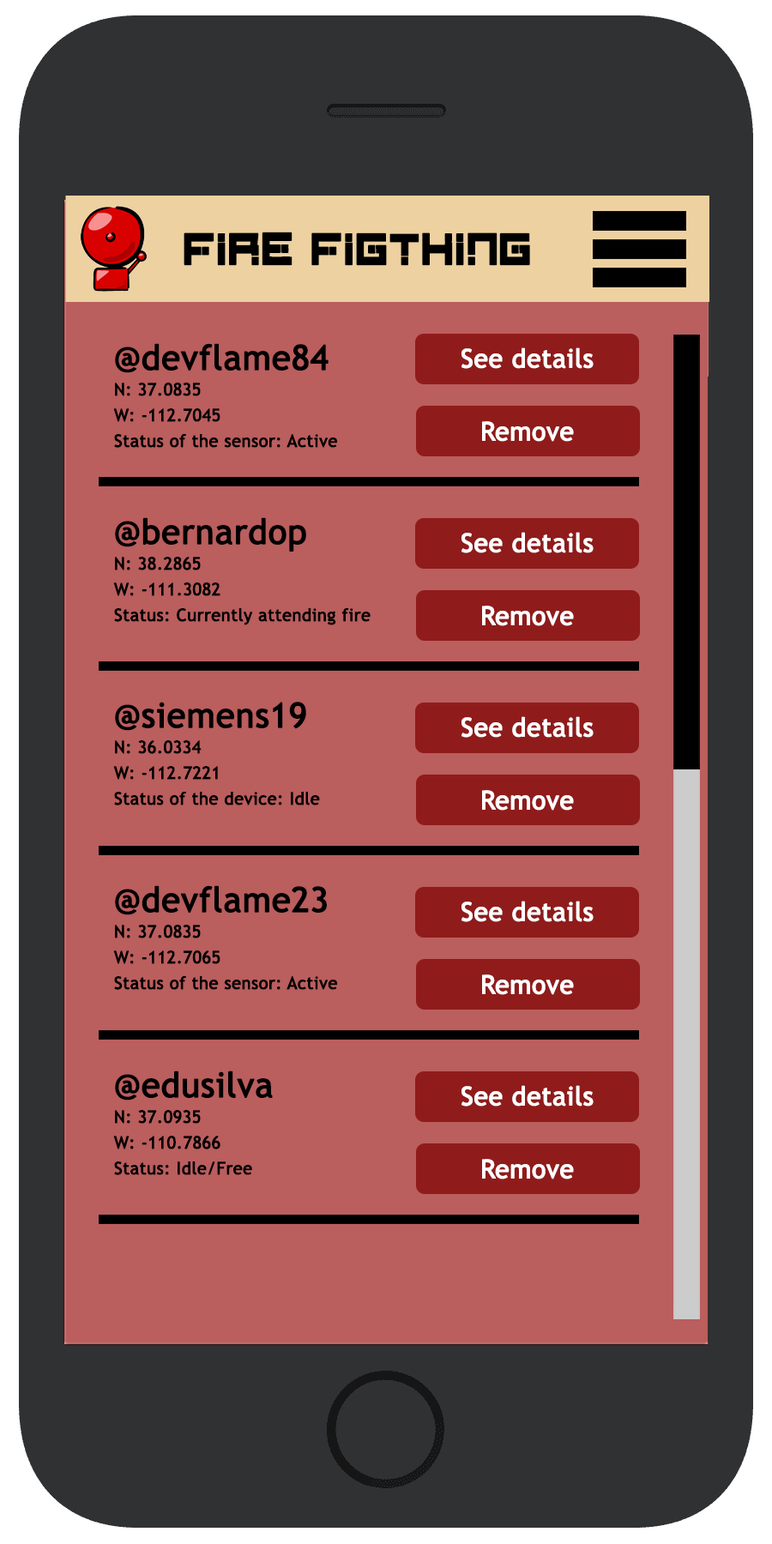
<style>
.page{position:relative;width:772px;height:1544px;background:#ba5e5e}
.page>*{position:absolute;margin:0}
.t1{font:42.3px "DigitalFirebomb";color:#000000;text-transform:uppercase;font-weight:bold;scale:0.86 1}
.t2{font:17.2px/25.7px "TrebuchetMS";color:#000000;font-weight:bold}
.t3{font:34.3px/17.2px "TrebuchetMS";color:#000000;font-weight:bold}
.t4{font:25.7px "TrebuchetMS";color:#ffffff;font-weight:bold}
</style>
<div class="page">
<p class="t1" style="left:184px;top:232px;width:346px;height:34px">FIRE FIGTHING</p>
<p class="t2" style="left:113px;top:343px;width:225px;height:105px"><span class="t3">@devflame84<br></span>N: 37.0835<br>W: -112.7045<br>Status of the sensor: Active</p>
<p class="t4" style="left:462px;top:347px;width:132px;height:22px">See details</p>
<p class="t4" style="left:482px;top:421px;width:92px;height:21px">Remove</p>
<p class="t2" style="left:113px;top:517px;width:258px;height:108px"><span class="t3">@bernardop<br></span>N: 38.2865<br>W: -111.3082<br>Status: Currently attending fire</p>
<p class="t4" style="left:462px;top:532px;width:132px;height:21px">See details</p>
<p class="t4" style="left:482px;top:606px;width:92px;height:20px">Remove</p>
<p class="t2" style="left:113px;top:702px;width:207px;height:104px"><span class="t3">@siemens19<br></span>N: 36.0334<br>W: -112.7221<br>Status of the device: Idle</p>
<p class="t4" style="left:462px;top:716px;width:132px;height:22px">See details</p>
<p class="t4" style="left:482px;top:790px;width:92px;height:21px">Remove</p>
<p class="t2" style="left:113px;top:885px;width:225px;height:105px"><span class="t3">@devflame23<br></span>N: 37.0835<br>W: -112.7065<br>Status of the sensor: Active</p>
<p class="t4" style="left:462px;top:901px;width:132px;height:21px">See details</p>
<p class="t4" style="left:482px;top:975px;width:92px;height:20px">Remove</p>
<p class="t2" style="left:113px;top:1071px;width:160px;height:104px"><span class="t3">@edusilva<br></span>N: 37.0935<br>W: -110.7866<br>Status: Idle/Free</p>
<p class="t4" style="left:462px;top:1085px;width:132px;height:22px">See details</p>
<p class="t4" style="left:482px;top:1159px;width:92px;height:21px">Remove</p>
</div>
